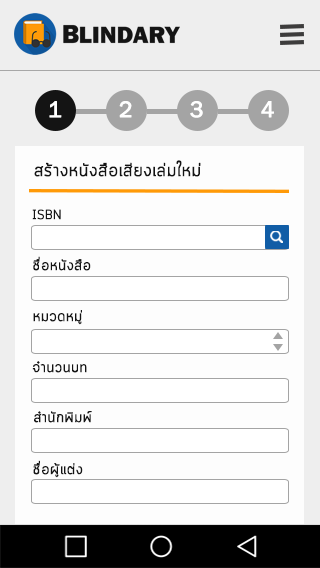
<style>
.page{position:relative;width:320px;height:568px;background:#fdfdfd}
.page>*{position:absolute;margin:0}
.t1{font:23px "FranklinGothic-Book";color:#ffffff;font-weight:bold}
.t2{font:23px "FranklinGothic-Book";color:#fefefe;font-weight:bold}
.t3{font:18px "Cloud-Light";color:#141414;font-weight:bold}
.t4{font:13px "Cloud-Light";color:#141414;font-weight:bold}
.t5{font:15px "Cloud-Light";color:#141414;font-weight:bold}
</style>
<div class="page">
<p class="t1" style="left:49px;top:101px;width:13px;height:17px">1</p>
<p class="t2" style="left:119px;top:101px;width:13px;height:17px">2</p>
<p class="t1" style="left:190px;top:101px;width:13px;height:17px">3</p>
<p class="t1" style="left:261px;top:101px;width:13px;height:17px">4</p>
<p class="t3" style="left:34px;top:160px;width:167px;height:17px">สร้างหนังสือเสียงเล่มใหม่</p>
<p class="t4" style="left:32px;top:209px;width:29px;height:11px">ISBN</p>
<p class="t5" style="left:33px;top:256px;width:58px;height:15px">ชื่อหนังสือ</p>
<p class="t5" style="left:33px;top:310px;width:49px;height:15px">หมวดหมู่</p>
<p class="t5" style="left:32px;top:361px;width:55px;height:12px">จำนวนบท</p>
<p class="t5" style="left:34px;top:411px;width:58px;height:12px">สำนักพิมพ์</p>
<p class="t5" style="left:33px;top:460px;width:50px;height:18px">ชื่อผู้แต่ง</p>
</div>
